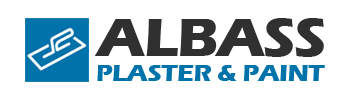
<style>
.page{position:relative;width:350px;height:100px;background:#ffffff}
.page>*{position:absolute;margin:0}
.t1{font:56.1px "ErasITC-Bold";letter-spacing:-0.025em;color:#303030;text-transform:uppercase;scale:1.05 1}
.t2{font:24px "ErasITC-Bold";letter-spacing:-0.025em;color:#0073aa;text-transform:uppercase;scale:1.09 1}
</style>
<div class="page">
<p class="t1" style="left:94px;top:18px;width:230px;height:39px">albass</p>
<p class="t2" style="left:97px;top:65px;width:228px;height:16px">Plaster &amp; paint</p>
</div>
